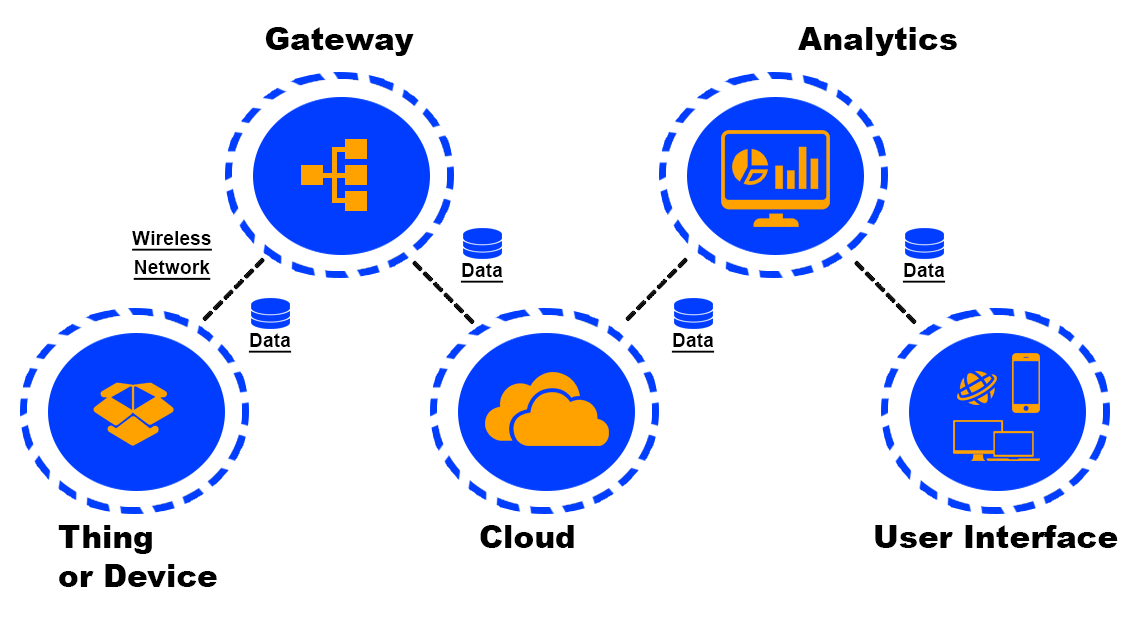
<style>
.page{position:relative;width:1140px;height:620px;background:#ffffff}
.page>*{position:absolute;margin:0}
.t1{font:31.1px "Arial-Black";color:#000000}
.t2{font:19.4px/29.2px "Arial-BoldMT";color:#000000;text-decoration:underline}
.t3{font:19.4px "Arial-BoldMT";color:#000000;text-decoration:underline}
.t4{font:31.1px/38.9px "Arial-Black";color:#000000}
</style>
<div class="page">
<p class="t1" style="left:265px;top:27px;width:149px;height:29px">Gateway</p>
<p class="t1" style="left:798px;top:27px;width:159px;height:29px">Analytics</p>
<p class="t2" style="left:132px;top:231px;width:80px;height:49px;text-align:center">Wireless<br>Network</p>
<p class="t3" style="left:460px;top:263px;width:44px;height:20px">Data</p>
<p class="t3" style="left:902px;top:263px;width:44px;height:20px">Data</p>
<p class="t3" style="left:248px;top:333px;width:44px;height:20px">Data</p>
<p class="t3" style="left:671px;top:333px;width:44px;height:20px">Data</p>
<p class="t4" style="left:58px;top:525px;width:159px;height:62px">Thing <br>or Device</p>
<p class="t1" style="left:480px;top:525px;width:94px;height:23px">Cloud</p>
<p class="t1" style="left:875px;top:525px;width:243px;height:23px">User Interface</p>
</div>
